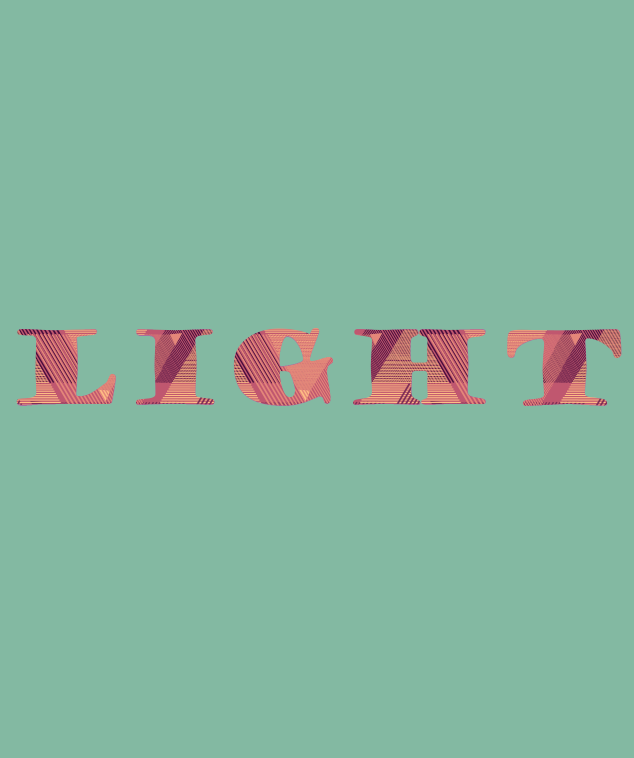
<style>
.page{position:relative;width:634px;height:758px;background:#83b9a2}
.page>*{position:absolute;margin:0}
.t1{font:100px "GoudyStout"}
</style>
<div class="page">
<p class="t1" style="left:17px;top:329px;width:605px;height:77px">Light</p>
</div>
